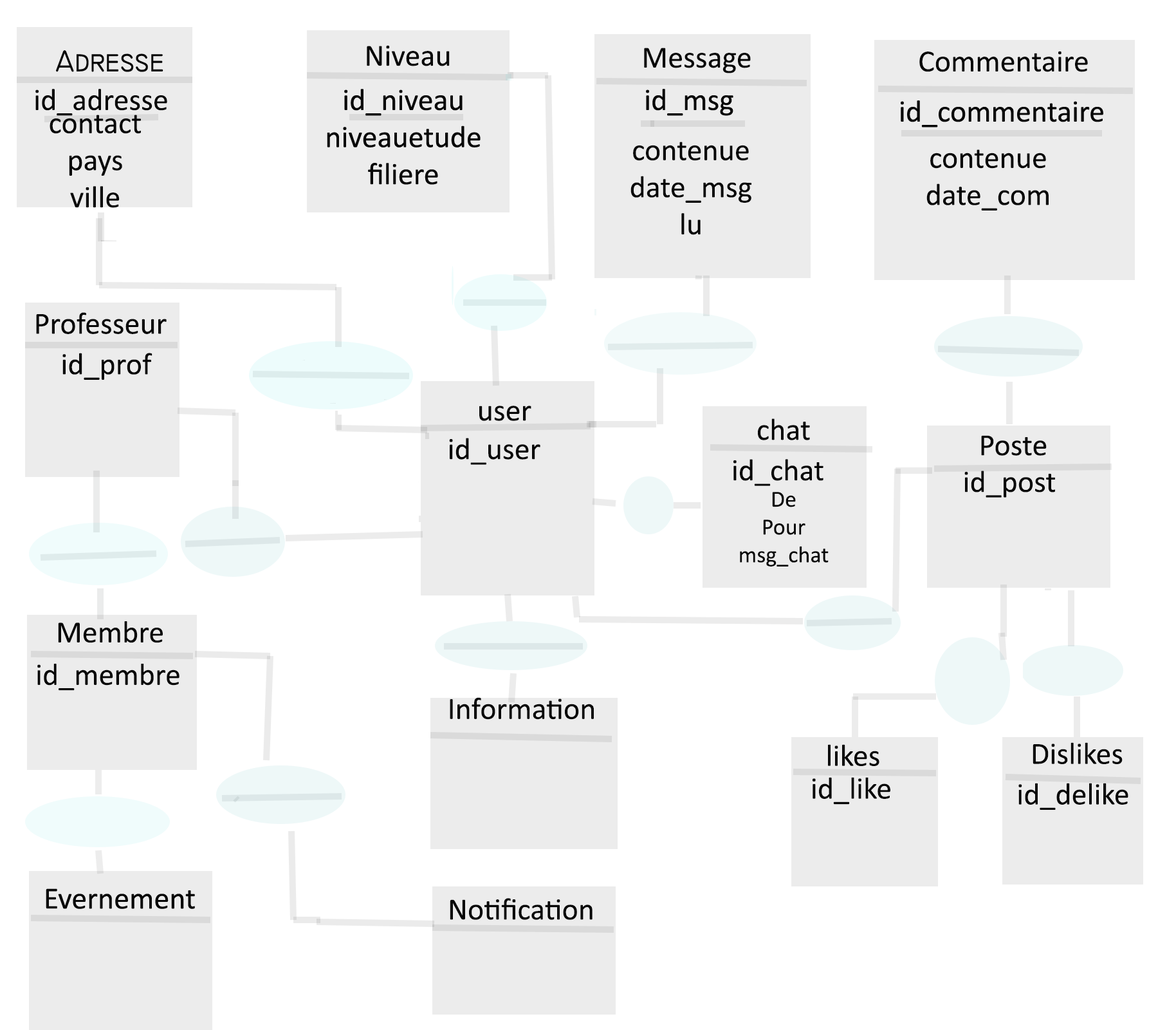
<style>
.page{position:relative;width:1158px;height:1030px;background:#ffffff}
.page>*{position:absolute;margin:0}
.t1{font:30.9px "Calibri";color:#070707}
.t2{font:23.2px "Calibri";color:#070707}
</style>
<div class="page">
<p class="t1" style="left:367px;top:45px;width:83px;height:21px">Niveau</p>
<p class="t1" style="left:644px;top:48px;width:107px;height:25px">Message</p>
<p class="t1" style="left:920px;top:51px;width:168px;height:21px">Commentaire</p>
<p class="t1" style="left:35px;top:89px;width:132px;height:27px">id_adresse</p>
<p class="t1" style="left:50px;top:115px;width:91px;height:93px;text-align:center">contact<br>pays<br>ville</p>
<p class="t1" style="left:631px;top:142px;width:121px;height:93px;text-align:center">contenue<br>date_msg<br>lu</p>
<p class="t1" style="left:927px;top:149px;width:122px;height:61px;text-align:center">contenue<br>date_com</p>
<p class="t1" style="left:36px;top:312px;width:131px;height:22px">Professeur</p>
<p class="t1" style="left:62px;top:353px;width:90px;height:27px">id_prof</p>
<p class="t1" style="left:479px;top:405px;width:52px;height:16px">user</p>
<p class="t1" style="left:758px;top:418px;width:52px;height:22px">chat</p>
<p class="t1" style="left:449px;top:438px;width:92px;height:27px">id_user</p>
<p class="t1" style="left:981px;top:435px;width:66px;height:21px">Poste</p>
<p class="t1" style="left:733px;top:459px;width:91px;height:27px">id_chat</p>
<p class="t1" style="left:965px;top:470px;width:90px;height:27px">id_post</p>
<p class="t2" style="left:740px;top:492px;width:89px;height:74px;text-align:center">De<br>Pour<br>msg_chat</p>
<p class="t1" style="left:58px;top:621px;width:105px;height:22px">Membre</p>
<p class="t1" style="left:37px;top:663px;width:143px;height:27px">id_membre</p>
<p class="t1" style="left:450px;top:697px;width:144px;height:22px">Information</p>
<p class="t1" style="left:828px;top:744px;width:52px;height:22px">likes</p>
<p class="t1" style="left:1033px;top:742px;width:90px;height:22px">Dislikes</p>
<p class="t1" style="left:812px;top:777px;width:79px;height:27px">id_like</p>
<p class="t1" style="left:1019px;top:782px;width:110px;height:27px">id_delike</p>
<p class="t1" style="left:450px;top:898px;width:143px;height:22px">Notification</p>
</div>
